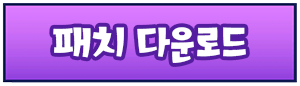
<style>
.page{position:relative;width:300px;height:86px}
.page>*{position:absolute;margin:0}
.t1{font:38.1px "OTDongwhacaekR";letter-spacing:-0.02em;color:#ffffff}
</style>
<div class="page">
<p class="t1" style="left:53px;top:26px;width:193px;height:37px">패치 다운로드</p>
</div>
